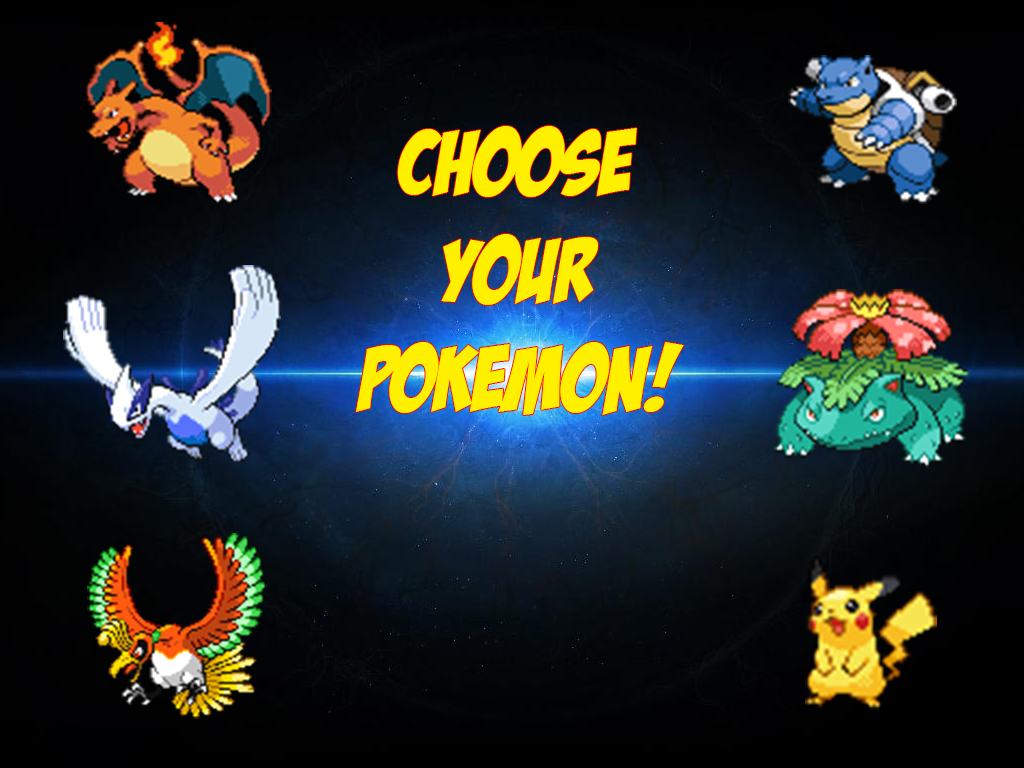
<style>
.page{position:relative;width:1024px;height:768px}
.page>*{position:absolute;margin:0}
.t1{font:90px "BadaBoomBB";color:#fff000}
</style>
<div class="page">
<p class="t1" style="left:356px;top:126px;width:328px;height:289px;text-align:center">Choose<br>your<br>Pokemon!</p>
</div>
